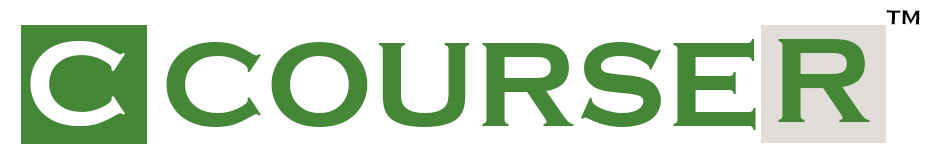
<style>
.page{position:relative;width:928px;height:165px;background:#ffffff}
.page>*{position:absolute;margin:0}
.t1{font:20.8px "CopperplateGothic-Bold";color:#000000}
.t2{font:125px "CopperplateGothic-Bold";color:#448737}
.t3{font:125px "CopperplateGothic-Bold";color:#ffffff}
</style>
<div class="page">
<p class="t1" style="left:886px;top:9px;width:35px;height:16px;rotate:2deg">TM</p>
<p class="t2" style="left:30px;top:39px;width:726px;height:91px"><span class="t3">C </span>COURSE</p>
<p class="t3" style="left:30px;top:41px;width:95px;height:85px">C</p>
<p class="t2" style="left:778px;top:39px;width:92px;height:83px">R</p>
</div>
